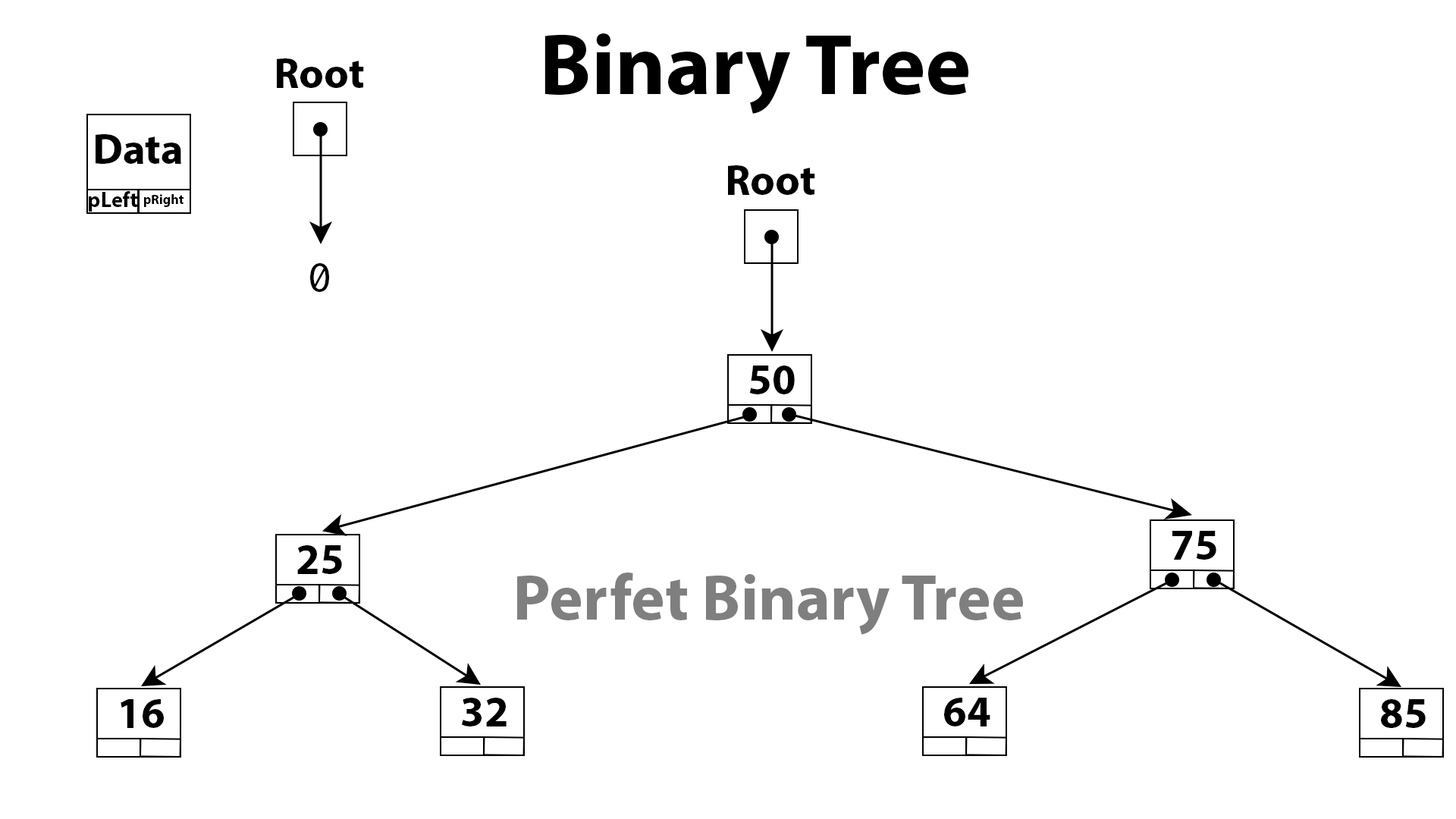
<style>
.page{position:relative;width:1456px;height:819px;background:#ffffff}
.page>*{position:absolute;margin:0}
.t1{font:86.3px "MyriadPro-Bold";color:#000000}
.t2{font:43.1px "MyriadPro-Bold";color:#000000}
.t3{font:21.6px "MyriadPro-Bold";color:#000000}
.t4{font:13.5px "MyriadPro-Bold";color:#000000}
.t5{font:43.1px "MyriadPro-Regular";color:#000000}
.t6{font:64.7px "MyriadPro-Bold";color:#7f7f7f}
</style>
<div class="page">
<p class="t1" style="left:544px;top:33px;width:424px;height:81px">Binary Tree</p>
<p class="t2" style="left:277px;top:58px;width:87px;height:30px">Root</p>
<p class="t2" style="left:96px;top:134px;width:85px;height:30px">Data</p>
<p class="t2" style="left:728px;top:165px;width:87px;height:30px">Root</p>
<p class="t3" style="left:89px;top:191px;width:48px;height:21px">pLeft</p>
<p class="t4" style="left:144px;top:194px;width:40px;height:13px">pRight</p>
<p class="t5" style="left:310px;top:263px;width:19px;height:29px">0</p>
<p class="t2" style="left:749px;top:366px;width:46px;height:28px">50</p>
<p class="t2" style="left:1172px;top:531px;width:44px;height:29px">75</p>
<p class="t2" style="left:297px;top:545px;width:45px;height:29px">25</p>
<p class="t6" style="left:517px;top:573px;width:506px;height:62px">Perfet Binary Tree</p>
<p class="t2" style="left:121px;top:699px;width:43px;height:29px">16</p>
<p class="t2" style="left:462px;top:698px;width:45px;height:28px">32</p>
<p class="t2" style="left:944px;top:698px;width:46px;height:28px">64</p>
<p class="t2" style="left:1381px;top:699px;width:45px;height:29px">85</p>
</div>
